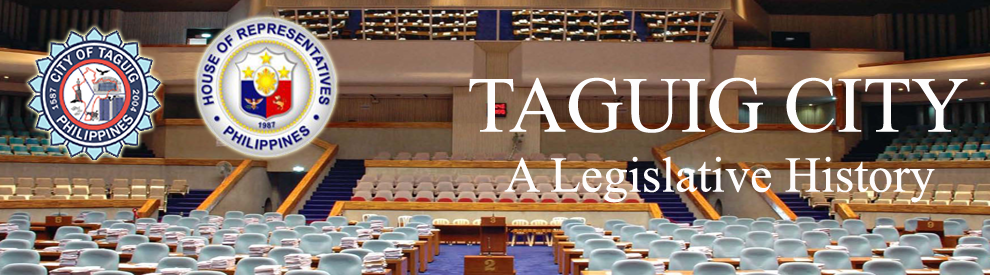
<style>
.page{position:relative;width:990px;height:275px}
.page>*{position:absolute;margin:0}
.t1{font:50px "TimesNewRomanPSMT";color:#fdfcfc}
.t2{font:79.2px "TimesNewRomanPSMT";color:#fdfdfd}
</style>
<div class="page">
<p class="t1" style="left:469px;top:77px;width:499px;height:126px;text-align:center"><span class="t2">TAGUIG CITY<br></span>A Legislative History</p>
</div>
